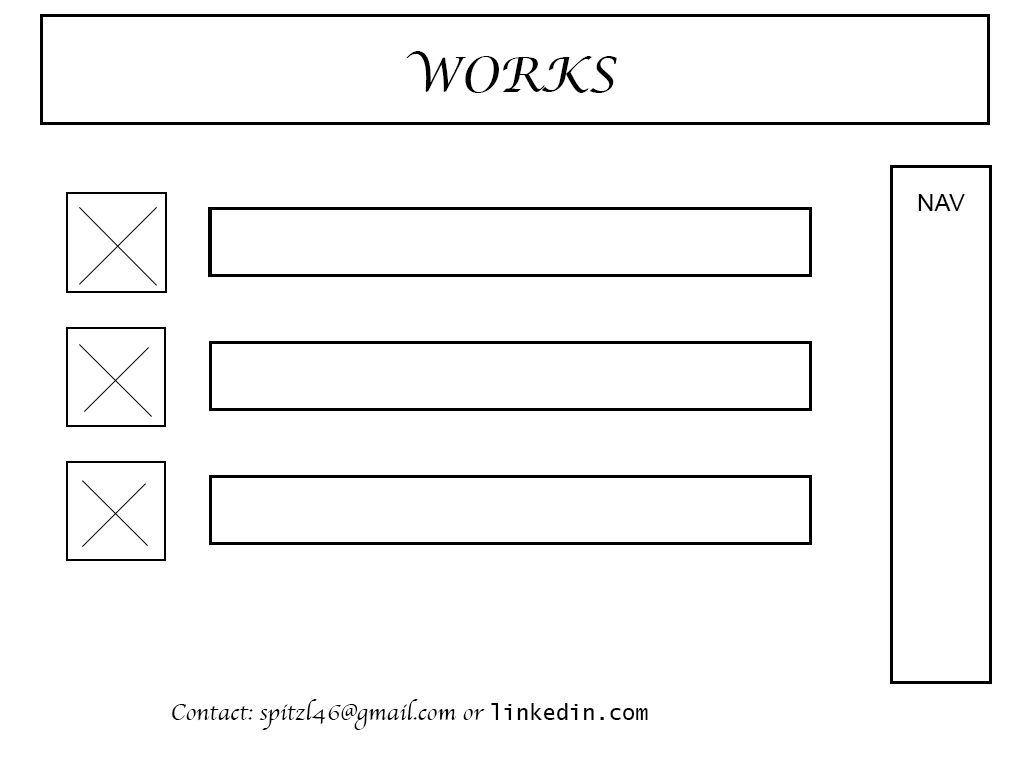
<style>
.page{position:relative;width:1024px;height:768px;background:#ffffff}
.page>*{position:absolute;margin:0}
.t1{font:48px "LucidaCalligraphy-Italic";color:#000000;text-transform:uppercase}
.t2{font:24px "ArialMT";color:#000000;text-transform:uppercase}
.t3{font:18px/24px "Apple-Chancery";color:#000000}
.t4{font:24px/24px "Apple-Chancery";color:#000000}
.t5{font:22px/24px "LucidaSans-Typewriter";color:#000000}
</style>
<div class="page">
<p class="t1" style="left:406px;top:51px;width:211px;height:42px">Works</p>
<p class="t2" style="left:918px;top:194px;width:47px;height:17px">Nav</p>
<p class="t3" style="left:172px;top:699px;width:476px;height:31px"><span class="t4">                    Contact: spitzl46@gmail.com or </span><span class="t5">linkedin.com <br></span><br><br>*Bio*<br><br><br>*Bio*<br><br><br>*Works*<br><br><br>*Resume*</p>
</div>
